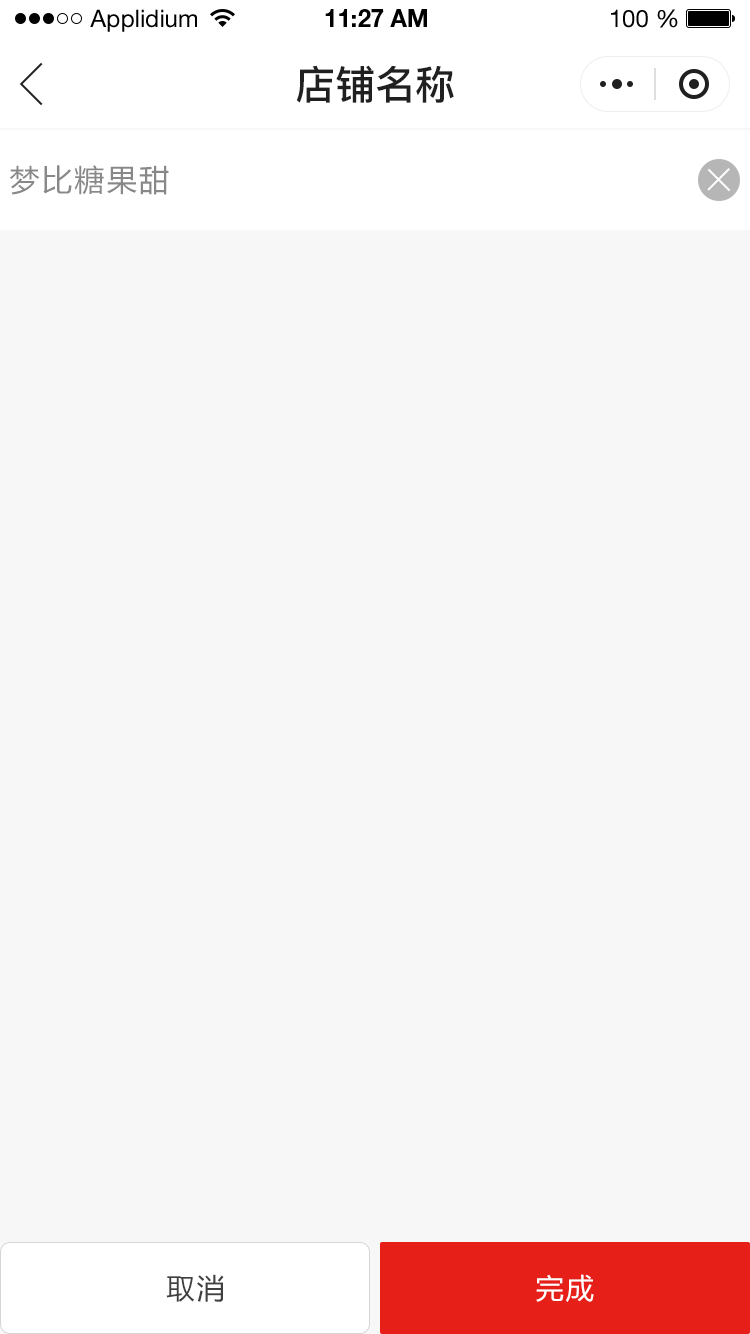
<style>
.page{position:relative;width:750px;height:1334px;background:#f7f7f7}
.page>*{position:absolute;margin:0}
.t1{font:24px "HelveticaNeueLTStd-Roman";color:#000000}
.t2{font:24px "HelveticaNeueLTStd-Bd";color:#000000}
.t3{font:40px "PingFang-SC-Bold";color:#202020;text-transform:uppercase}
.t4{font:30px "MicrosoftYaHei";letter-spacing:0.08em;color:#888888}
.t5{font:28px "MicrosoftYaHei";letter-spacing:0.08em;color:#404040}
.t6{font:28px "MicrosoftYaHei";letter-spacing:0.08em;color:#ffffff}
</style>
<div class="page">
<p class="t1" style="left:90px;top:9px;width:107px;height:23px">Applidium</p>
<p class="t2" style="left:325px;top:9px;width:102px;height:18px">11:27 AM</p>
<p class="t1" style="left:611px;top:9px;width:67px;height:19px">100 %</p>
<p class="t3" style="left:296px;top:65px;width:158px;height:38px">店铺名称</p>
<p class="t4" style="left:10px;top:165px;width:159px;height:30px">梦比糖果甜</p>
<p class="t5" style="left:166px;top:1274px;width:58px;height:28px">取消</p>
<p class="t6" style="left:536px;top:1274px;width:58px;height:28px">完成</p>
</div>
